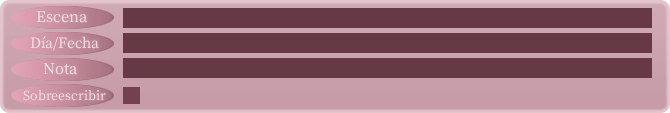
<style>
.page{position:relative;width:670px;height:113px;background:#673945}
.page>*{position:absolute;margin:0}
.t1{font:18px "OfficialFateFont-Medium";color:#fadde4}
.t2{font:17px "OfficialFateFont-Medium";color:#fadde4}
.t3{font:15px "OfficialFateFont-Medium";color:#fadde4}
</style>
<div class="page">
<p class="t1" style="left:36px;top:11px;width:52px;height:12px">Escena</p>
<p class="t2" style="left:30px;top:36px;width:69px;height:15px">Día/Fecha</p>
<p class="t1" style="left:43px;top:63px;width:35px;height:12px">Nota</p>
<p class="t3" style="left:23px;top:89px;width:83px;height:12px">Sobreescribir</p>
</div>
